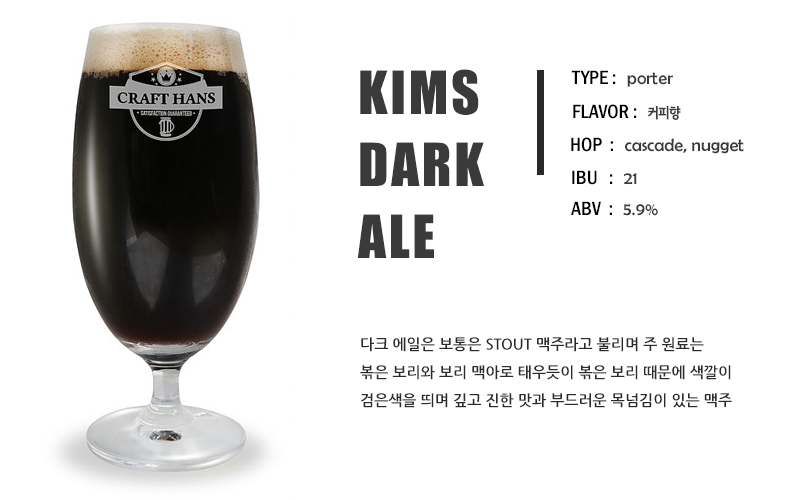
<style>
.page{position:relative;width:800px;height:500px;background:#ffffff}
.page>*{position:absolute;margin:0}
.t1{font:55px/72px "Impact";letter-spacing:0.05em;color:#3a3a3a}
.t2{font:20px "FranklinGothic-MediumCond";color:#000000}
.t3{font:18px "BerlinSansFB-Reg";color:#3a3a3a}
.t4{font:14px "SeN-CBL";color:#3a3a3a}
.t5{font:15px/28px "NanumGothicBold";color:#2b2b2b}
</style>
<div class="page">
<p class="t1" style="left:357px;top:69px;width:127px;height:189px">KIMS<br>DARK<br>ALE</p>
<p class="t2" style="left:571px;top:70px;width:102px;height:17px">TYPE :  <span class="t3">porter</span></p>
<p class="t2" style="left:573px;top:104px;width:108px;height:16px">FLAVOR :  <span class="t4">커피향</span></p>
<p class="t3" style="left:571px;top:137px;width:173px;height:17px"><span class="t2">HOP  :  </span>cascade, nugget</p>
<p class="t2" style="left:572px;top:170px;width:65px;height:15px">IBU   :  <span class="t3">21</span></p>
<p class="t2" style="left:571px;top:201px;width:87px;height:15px">ABV  :  <span class="t3">5.9%</span></p>
<p class="t5" style="left:360px;top:337px;width:372px;height:71px">다크 에일은 보통은 STOUT 맥주라고 불리며 주 원료는 <br>볶은 보리와 보리 맥아로 태우듯이 볶은 보리 때문에 색깔이 <br>검은색을 띄며 깊고 진한 맛과 부드러운 목넘김이 있는 맥주</p>
</div>
